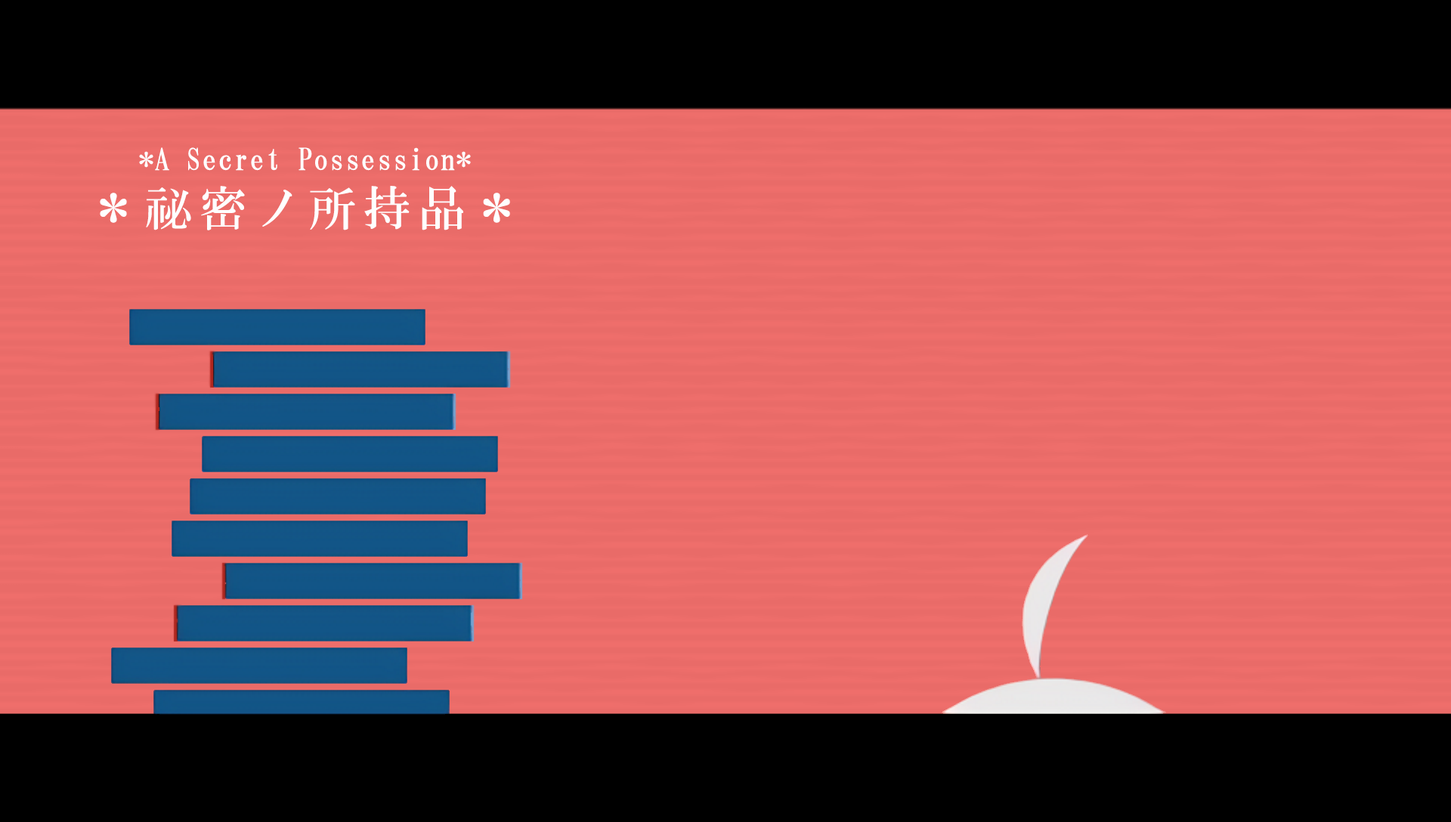
<style>
.page{position:relative;width:1451px;height:822px;background:#000000}
.page>*{position:absolute;margin:0}
.t1{font:30.2px "HGMinchoB";letter-spacing:0.025em;color:#fefeff}
.t2{font:47.6px "HGMinchoB";letter-spacing:0.15em;color:#fefeff}
</style>
<div class="page">
<p class="t1" style="left:139px;top:147px;width:332px;height:24px">*A Secret Possession*</p>
<p class="t2" style="left:100px;top:186px;width:410px;height:44px">＊祕密ノ所持品＊</p>
</div>
